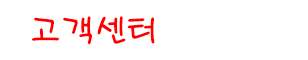
<style>
.page{position:relative;width:308px;height:60px;background:#ffffff}
.page>*{position:absolute;margin:0}
.t1{font:34px "MDGaesung";color:#ff0000}
</style>
<div class="page">
<p class="t1" style="left:31px;top:16px;width:124px;height:29px">고객센터</p>
</div>
